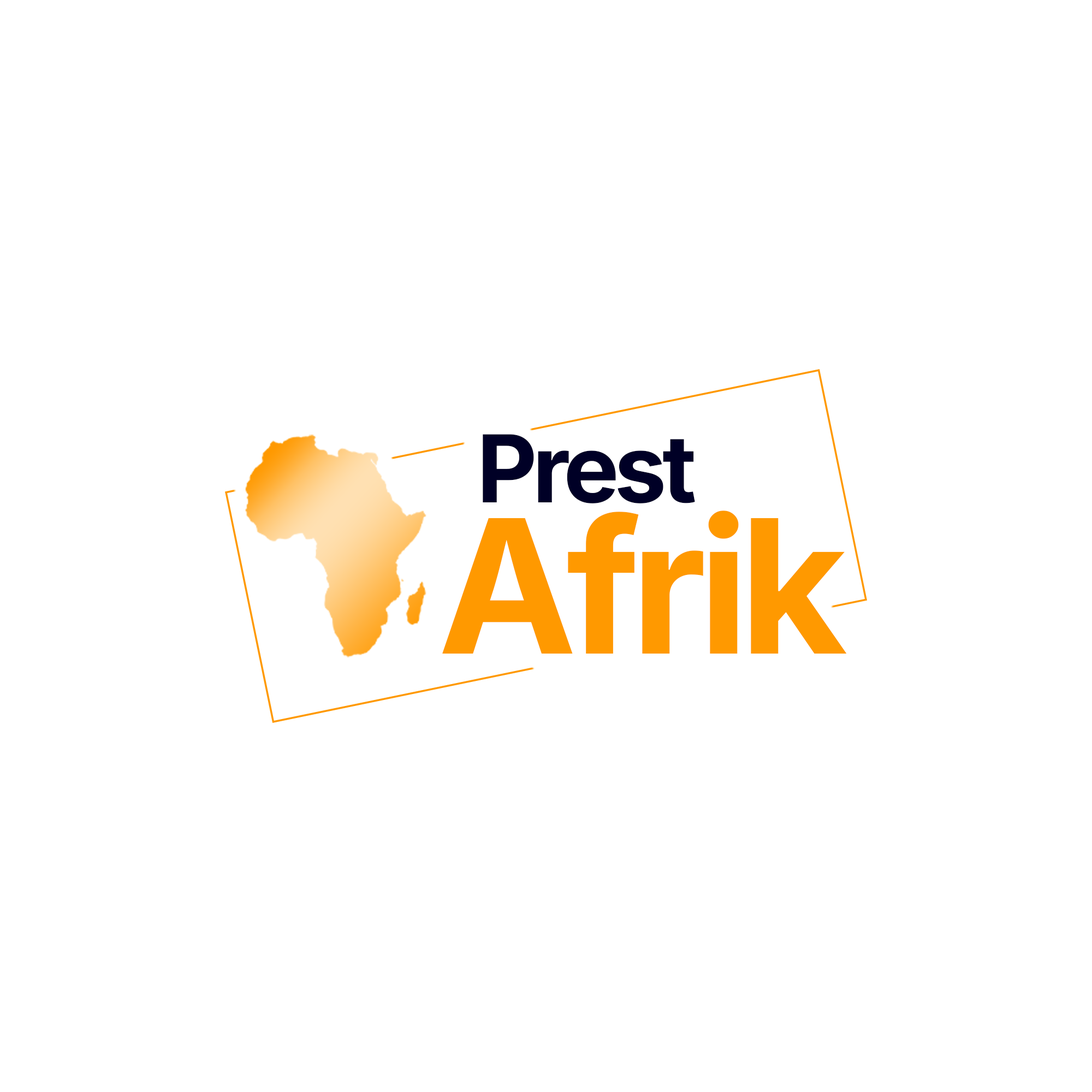
<style>
.page{position:relative;width:1092px;height:1092px;background:#ffffff}
.page>*{position:absolute;margin:0}
.t1{font:93.4px "Inter-Bold";letter-spacing:-0.05em;color:#000026}
.t2{font:186.2px "Inter-Bold";letter-spacing:-0.05em;color:#ff9900}
</style>
<div class="page">
<p class="t1" style="left:483px;top:434px;width:212px;height:69px">Prest</p>
<p class="t2" style="left:442px;top:511px;width:405px;height:143px">Afrik</p>
</div>
